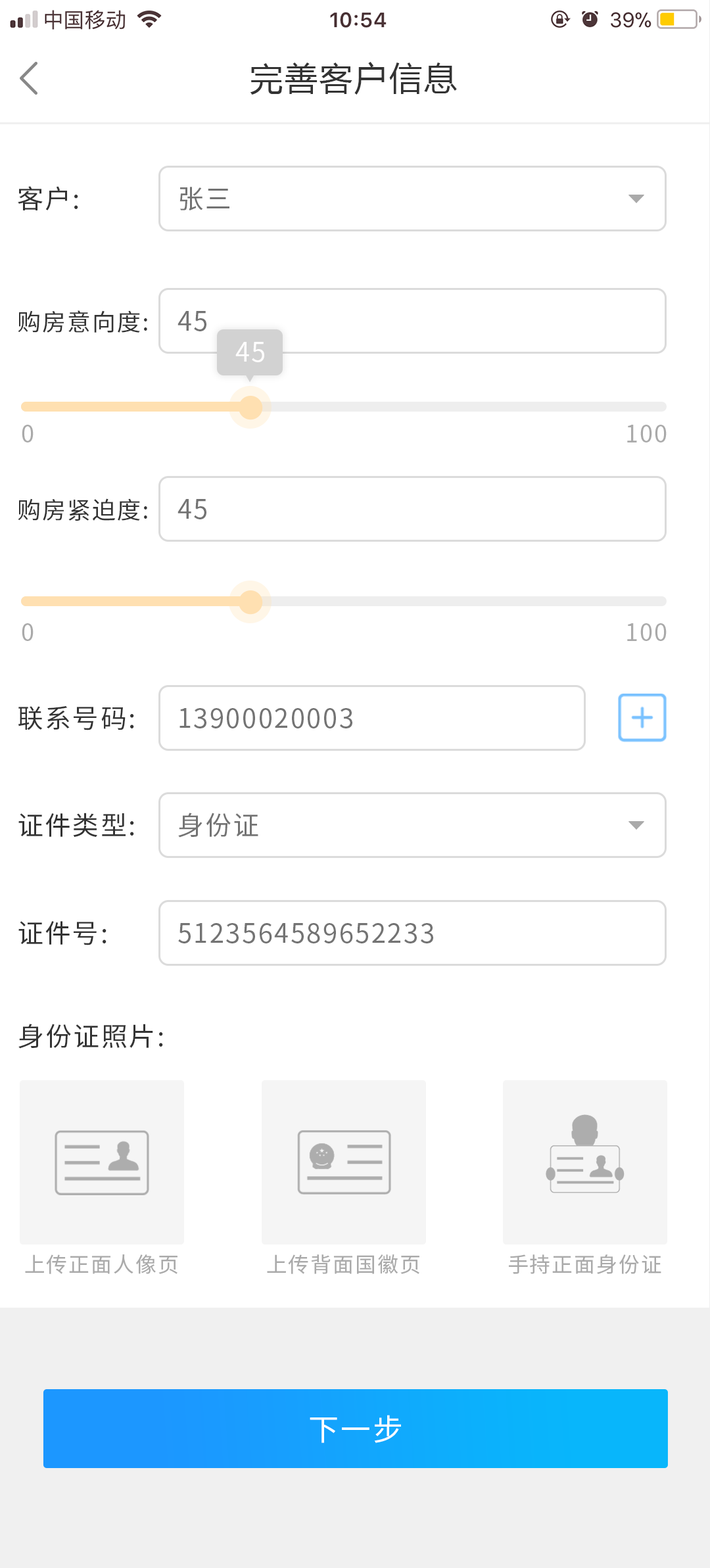
<style>
.page{position:relative;width:710px;height:1568px;background:#ffffff}
.page>*{position:absolute;margin:0}
.t1{font:32.9px "MicrosoftYaHei";letter-spacing:0.06em;color:#333333}
.t2{font:26.3px "SourceHanSansCN-Regular";letter-spacing:0.06em;color:#333333}
.t3{font:26.3px "SourceHanSansCN-Regular";letter-spacing:0.06em;color:#737373}
.t4{font:23.7px "SourceHanSansCN-Regular";letter-spacing:0.06em;color:#333333}
.t5{font:26.3px "SourceHanSansCN-Regular";letter-spacing:0.06em;color:#fffefe}
.t6{font:23.7px "SourceHanSansCN-Regular";letter-spacing:0.06em;color:#aaaaaa}
.t7{font:21px "SourceHanSansCN-Regular";letter-spacing:0.06em;color:#aaaaaa}
.t8{font:30.2px "SourceHanSansCN-Regular";letter-spacing:0.06em;color:#ffffff}
</style>
<div class="page">
<p class="t1" style="left:250px;top:62px;width:207px;height:33px">完善客户信息</p>
<p class="t2" style="left:18px;top:186px;width:60px;height:24px">客户:</p>
<p class="t3" style="left:179px;top:187px;width:50px;height:24px">张三</p>
<p class="t4" style="left:18px;top:310px;width:129px;height:23px">购房意向度:</p>
<p class="t3" style="left:178px;top:311px;width:28px;height:20px">45</p>
<p class="t5" style="left:235px;top:342px;width:29px;height:20px">45</p>
<p class="t6" style="left:22px;top:425px;width:12px;height:17px">0</p>
<p class="t6" style="left:627px;top:425px;width:40px;height:17px">100</p>
<p class="t4" style="left:18px;top:498px;width:129px;height:23px">购房紧迫度:</p>
<p class="t3" style="left:178px;top:499px;width:28px;height:20px">45</p>
<p class="t6" style="left:22px;top:623px;width:12px;height:18px">0</p>
<p class="t6" style="left:627px;top:623px;width:40px;height:18px">100</p>
<p class="t2" style="left:18px;top:705px;width:116px;height:25px">联系号码:</p>
<p class="t3" style="left:179px;top:708px;width:173px;height:20px">13900020003</p>
<p class="t2" style="left:18px;top:813px;width:116px;height:24px">证件类型:</p>
<p class="t3" style="left:178px;top:813px;width:80px;height:25px">身份证</p>
<p class="t2" style="left:18px;top:921px;width:89px;height:24px">证件号:</p>
<p class="t3" style="left:178px;top:923px;width:255px;height:20px">5123564589652233</p>
<p class="t2" style="left:18px;top:1024px;width:145px;height:25px">身份证照片:</p>
<p class="t7" style="left:267px;top:1254px;width:152px;height:20px">上传背面国徽页</p>
<p class="t7" style="left:25px;top:1254px;width:153px;height:20px">上传正面人像页</p>
<p class="t7" style="left:508px;top:1254px;width:153px;height:20px">手持正面身份证</p>
<p class="t8" style="left:310px;top:1415px;width:91px;height:28px">下一步</p>
</div>
